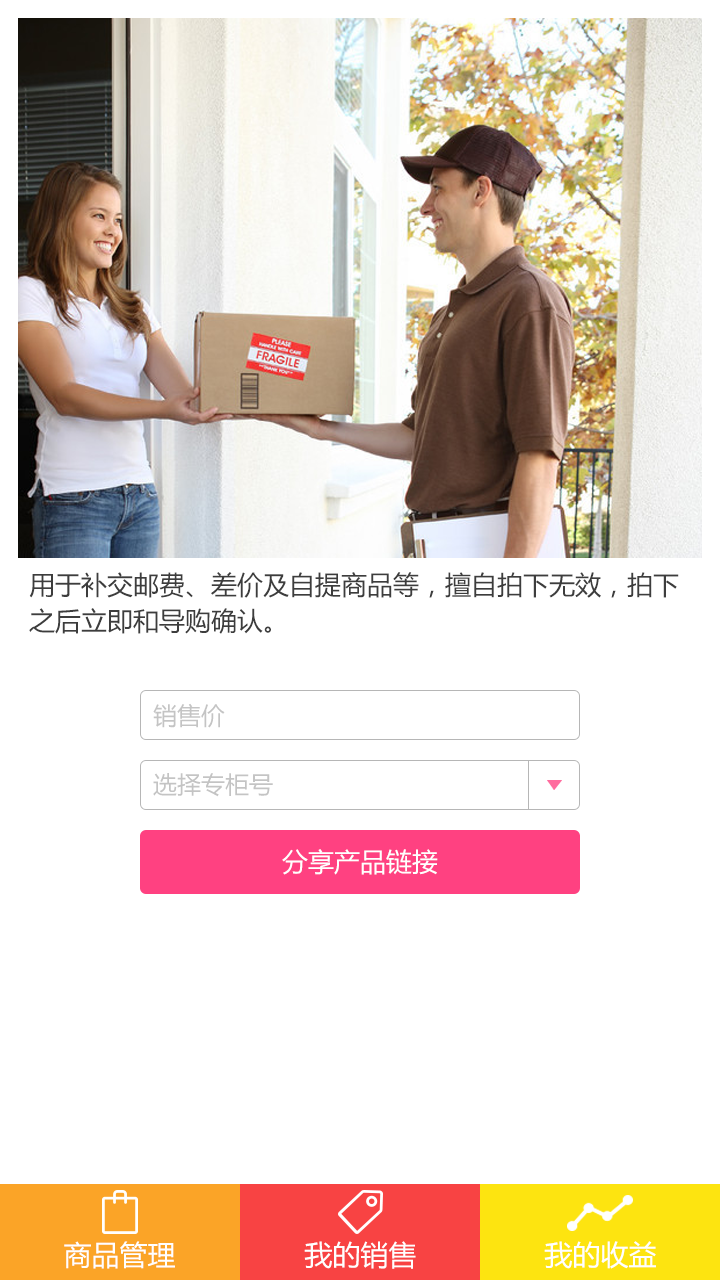
<style>
.page{position:relative;width:720px;height:1280px;background:#ffffff}
.page>*{position:absolute;margin:0}
.t1{font:26px/36px "MicrosoftYaHei";color:#3d3d3d}
.t2{font:24px "MicrosoftYaHei";color:#c4c4c4}
.t3{font:26px "MicrosoftYaHei";color:#ffffff}
.t4{font:28px "MicrosoftYaHei";color:#ffffff}
</style>
<div class="page">
<p class="t1" style="left:29px;top:572px;width:650px;height:62px">用于补交邮费、差价及自提商品等，擅自拍下无效，拍下<br>之后立即和导购确认。</p>
<p class="t2" style="left:153px;top:703px;width:72px;height:25px">销售价</p>
<p class="t2" style="left:153px;top:773px;width:120px;height:24px">选择专柜号</p>
<p class="t3" style="left:282px;top:849px;width:156px;height:26px">分享产品链接</p>
<p class="t4" style="left:64px;top:1241px;width:111px;height:28px">商品管理</p>
<p class="t4" style="left:304px;top:1241px;width:112px;height:28px">我的销售</p>
<p class="t4" style="left:544px;top:1241px;width:112px;height:28px">我的收益</p>
</div>
